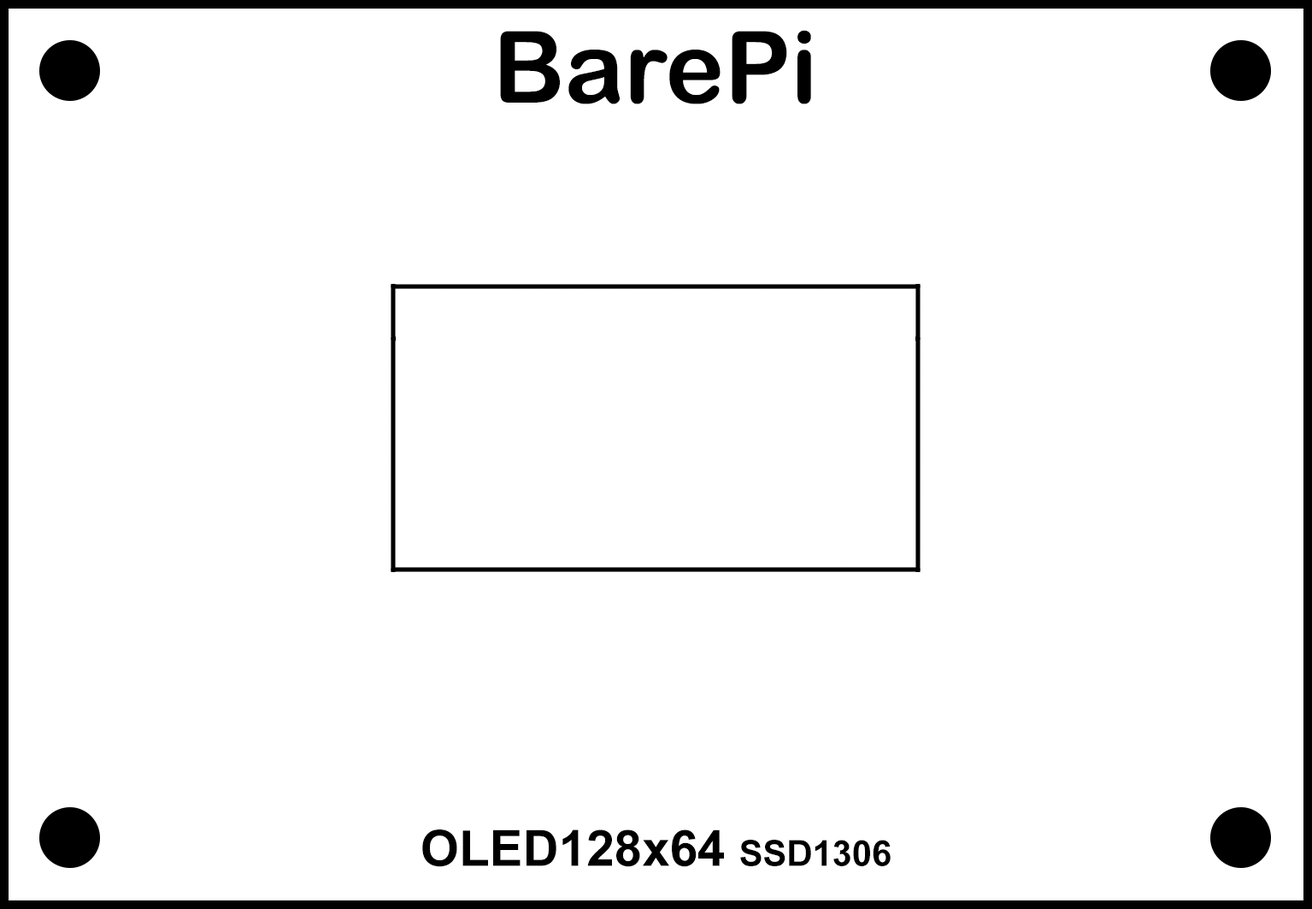
<style>
.page{position:relative;width:1312px;height:909px;background:#ffffff}
.page>*{position:absolute;margin:0}
.t1{font:99.7px "ArialRoundedMTBold";color:#000000}
.t2{font:49.9px "Arial-BoldMT";color:#000000}
.t3{font:35.6px "Arial-BoldMT";color:#000000}
</style>
<div class="page">
<p class="t1" style="left:500px;top:30px;width:311px;height:74px">BarePi</p>
<p class="t2" style="left:422px;top:829px;width:469px;height:38px">OLED128x64 <span class="t3">SSD1306</span></p>
</div>
